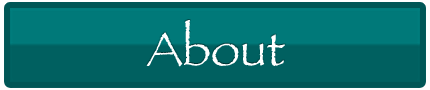
<style>
.page{position:relative;width:430px;height:90px;background:#006060}
.page>*{position:absolute;margin:0}
.t1{font:48px "Papyrus";color:#ffffff}
</style>
<div class="page">
<p class="t1" style="left:146px;top:20px;width:139px;height:47px">About</p>
</div>
